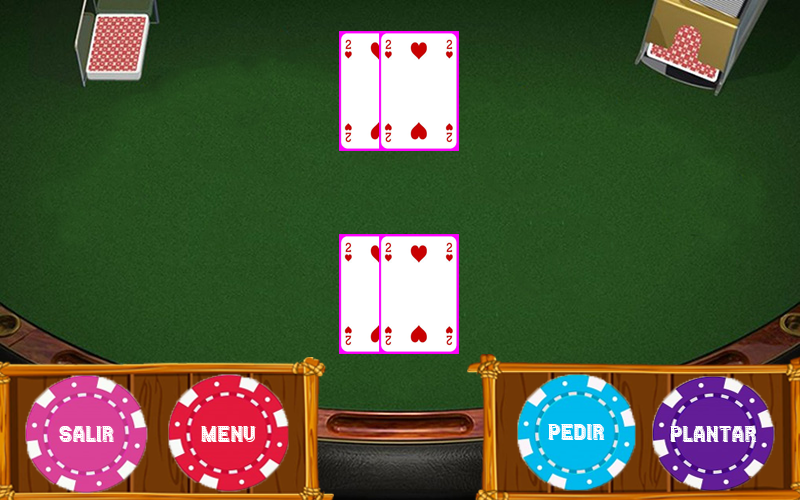
<style>
.page{position:relative;width:800px;height:500px}
.page>*{position:absolute;margin:0}
.t1{font:24px "CasinoShadow-Regular";color:#ffffff}
</style>
<div class="page">
<p class="t1" style="left:548px;top:424px;width:57px;height:16px">pedir</p>
<p class="t1" style="left:59px;top:426px;width:55px;height:16px">Salir</p>
<p class="t1" style="left:201px;top:426px;width:55px;height:16px">menu</p>
<p class="t1" style="left:670px;top:426px;width:87px;height:16px">Plantar</p>
</div>
